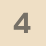
<style>
.page{position:relative;width:46px;height:46px;background:#efdfc5}
.page>*{position:absolute;margin:0}
.t1{font:30.1px "ClearSans-Bold";color:#777167}
</style>
<div class="page">
<p class="t1" style="left:13px;top:12px;width:18px;height:21px">4</p>
</div>
